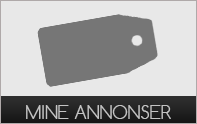
<style>
.page{position:relative;width:197px;height:124px;background:#e8e8e8}
.page>*{position:absolute;margin:0}
.t1{font:18px "Comfortaa-Light";color:#c3c3c3}
</style>
<div class="page">
<p class="t1" style="left:26px;top:105px;width:145px;height:14px">MINE ANNONSER</p>
</div>
